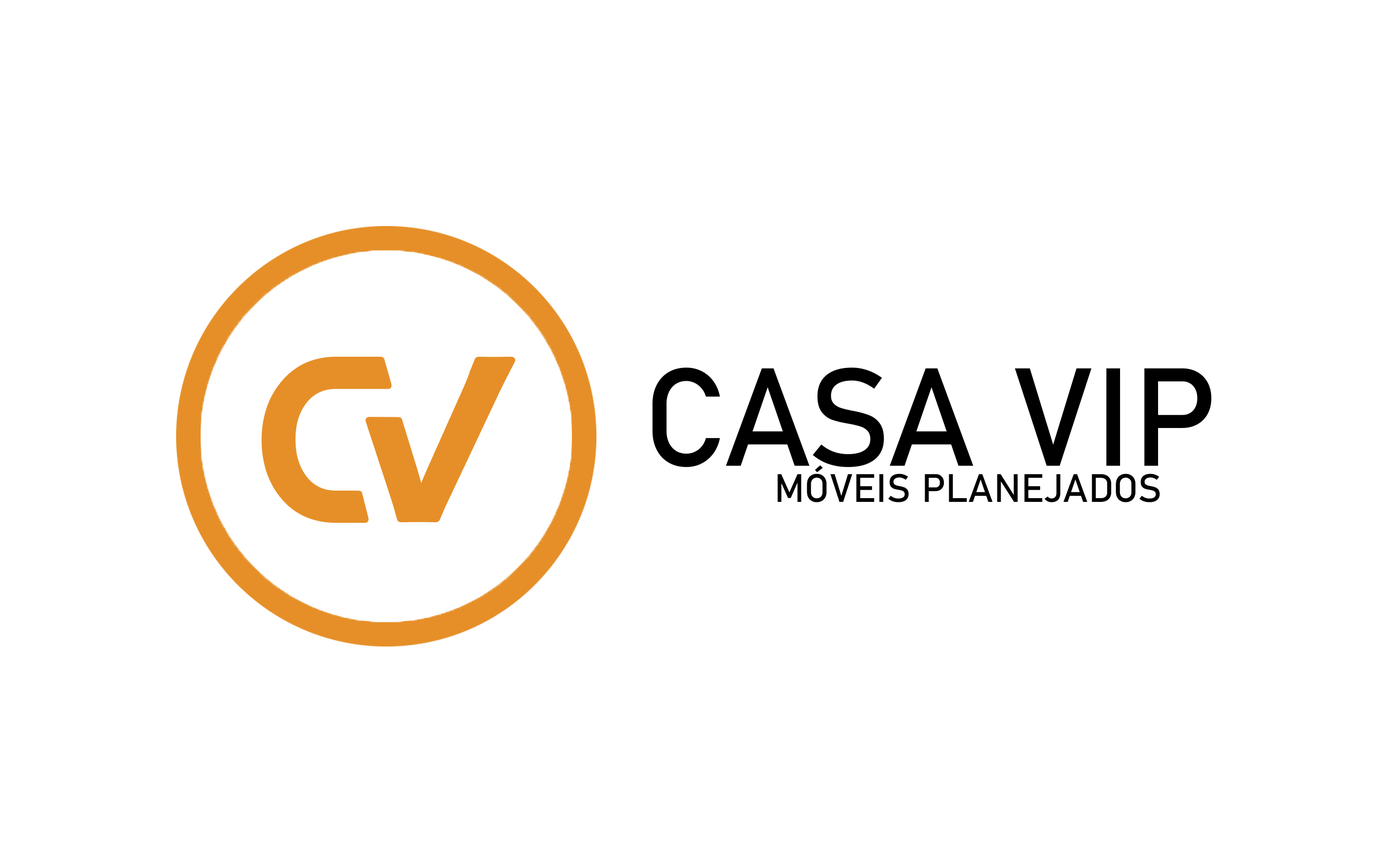
<style>
.page{position:relative;width:1392px;height:857px;background:#ffffff}
.page>*{position:absolute;margin:0}
.t1{font:137.3px "Bahnschrift";color:#000000}
.t2{font:39.1px "Bahnschrift";color:#000000}
</style>
<div class="page">
<p class="t1" style="left:652px;top:367px;width:560px;height:100px">CASA VIP</p>
<p class="t2" style="left:777px;top:465px;width:383px;height:37px">MÓVEIS PLANEJADOS</p>
</div>
